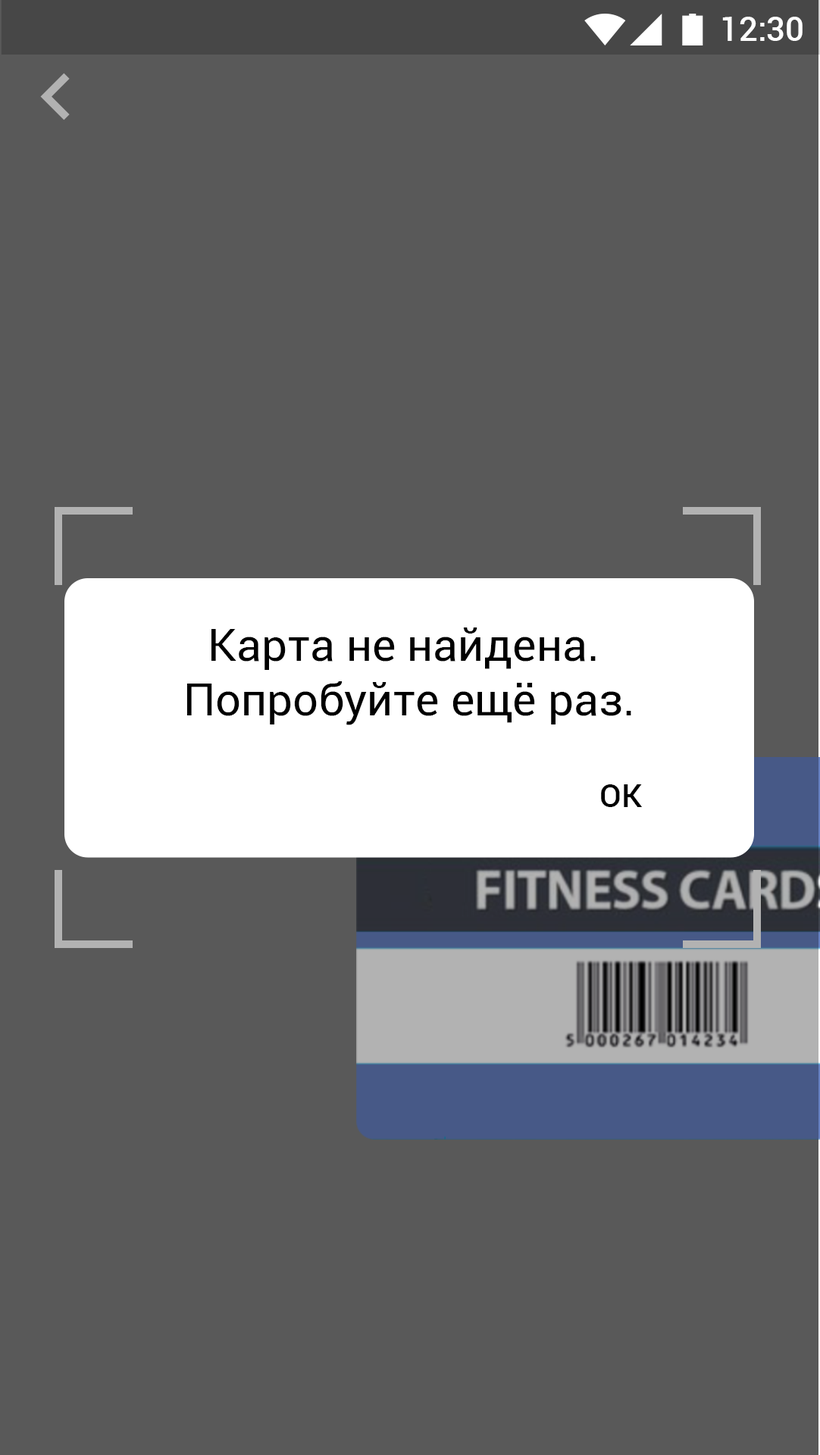
<style>
.page{position:relative;width:820px;height:1455px;background:#595959}
.page>*{position:absolute;margin:0}
.t1{font:33.3px "Roboto-Medium";color:#ffffff}
.t2{font:45.5px "Roboto-Regular";color:#000000}
.t3{font:31.8px "Roboto-Medium";color:#000000}
</style>
<div class="page">
<p class="t1" style="left:722px;top:17px;width:80px;height:24px">12:30</p>
<p class="t2" style="left:186px;top:627px;width:445px;height:98px;text-align:center">Карта не найдена. <br>Попробуйте ещё раз.</p>
<p class="t3" style="left:601px;top:784px;width:41px;height:23px">ОК</p>
</div>
